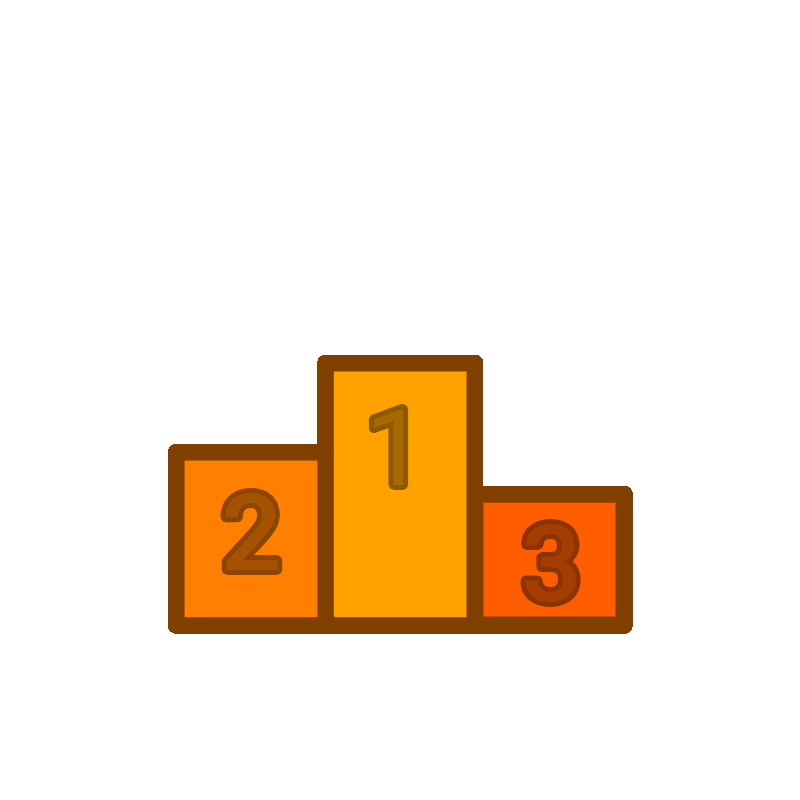
<style>
.page{position:relative;width:800px;height:800px;background:#ffffff}
.page>*{position:absolute;margin:0}
.t1{font:106.7px "Roboto-Regular";color:#a66900}
.t2{font:106.7px "Roboto-Medium";color:#a65300}
</style>
<div class="page">
<p class="t1" style="left:373px;top:409px;width:31px;height:76px">1</p>
<p class="t2" style="left:225px;top:493px;width:53px;height:77px">2</p>
</div>
